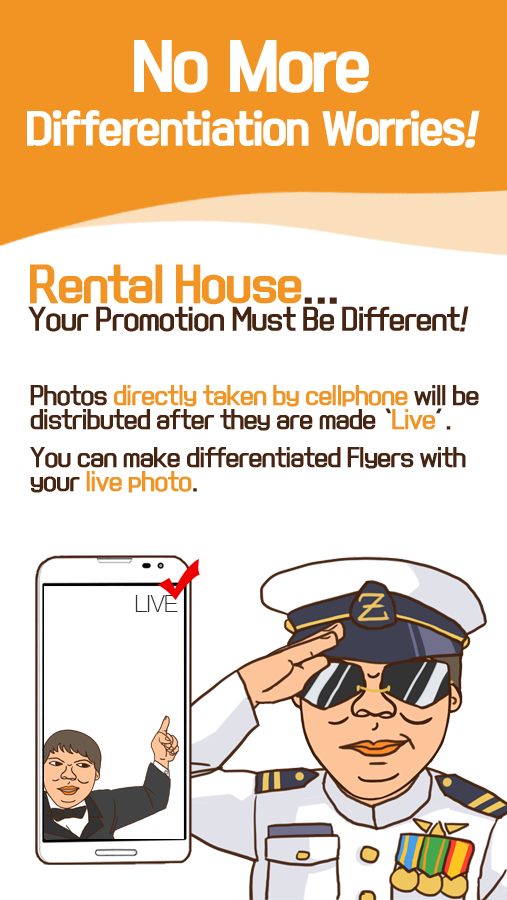
<style>
.page{position:relative;width:507px;height:900px;background:#ffffff}
.page>*{position:absolute;margin:0}
.t1{font:40px/72px "KoreanBLACK-B";letter-spacing:-0.05em;color:#ffffff}
.t2{font:60px/72px "KoreanBLACK-B";letter-spacing:-0.05em;color:#ffffff}
.t3{font:40px/72px "KoreanBLACK-B";letter-spacing:-0.05em;color:#ffffff;font-style:italic}
.t4{font:26px/42px "KoreanYNMYT-M";letter-spacing:-0.05em;color:#462412}
.t5{font:42px/42px "KoreanYNMYT-B";letter-spacing:-0.05em;color:#f29423}
.t6{font:42px/42px "KoreanYNMYT-M";letter-spacing:-0.05em;color:#462412}
.t7{font:26px/42px "KoreanYNMYT-M";letter-spacing:-0.05em;color:#462412;font-style:italic}
.t8{font:22px/24px "KoreanYNMYT-M";letter-spacing:-0.05em;color:#462412}
.t9{font:22px/24px "KoreanYNMYT-M";letter-spacing:-0.05em;color:#f29423}
.t10{font:22px/14px "KoreanYNMYT-M";letter-spacing:-0.05em;color:#462412}
.t11{font:22px/14px "KoreanYNMYT-M";letter-spacing:-0.05em;color:#f29423}
.t12{font:24px "HelveNueThin";color:#333333}
</style>
<div class="page">
<p class="t1" style="left:27px;top:40px;width:453px;height:108px;text-align:center"><span class="t2">No More<br></span>Differentiation Worries<span class="t3">!</span></p>
<p class="t4" style="left:28px;top:264px;width:441px;height:68px"><span class="t5">Rental House</span><span class="t6">...<br></span>Your Promotion Must Be Different<span class="t7">!</span></p>
<p class="t8" style="left:30px;top:385px;width:449px;height:108px">Photos <span class="t9">directly taken by cellphone</span> will be<br>distr<span class="t10">ibuted after they are made ‘</span><span class="t11">Live</span><span class="t10">’.<br><br>You can ma</span>ke differentiated Flyers with <br>your <span class="t9">live photo</span>.</p>
<p class="t12" style="left:135px;top:595px;width:43px;height:17px">LIVE</p>
</div>
